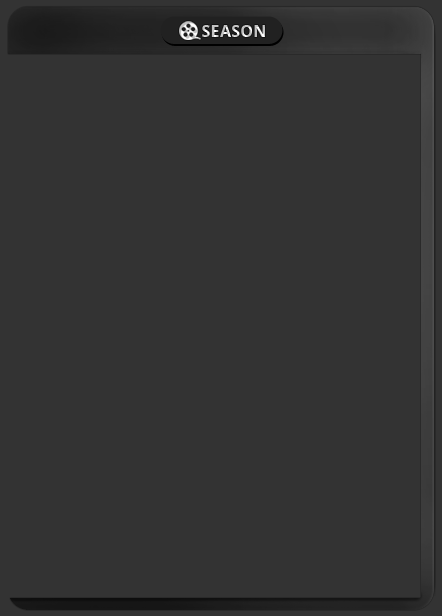
<style>
.page{position:relative;width:442px;height:616px;background:#333333}
.page>*{position:absolute;margin:0}
.t1{font:15.8px "OpenSans-Bold";letter-spacing:0.025em}
</style>
<div class="page">
<p class="t1" style="left:202px;top:25px;width:63px;height:12px">SEASON</p>
</div>
